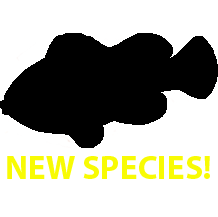
<style>
.page{position:relative;width:218px;height:217px;background:#ffffff}
.page>*{position:absolute;margin:0}
.t1{font:33.3px "MyriadPro-Bold";color:#f8fb04}
</style>
<div class="page">
<p class="t1" style="left:7px;top:156px;width:203px;height:23px">NEW SPECIES!</p>
</div>
